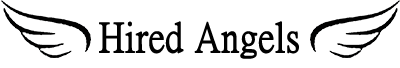
<style>
.page{position:relative;width:400px;height:68px;background:#ffffff}
.page>*{position:absolute;margin:0}
.t1{font:41.2px "PMingLiU-ExtB";color:#000000;font-weight:bold;scale:0.91 1}
</style>
<div class="page">
<p class="t1" style="left:99px;top:21px;width:200px;height:38px">Hired Angels</p>
</div>
